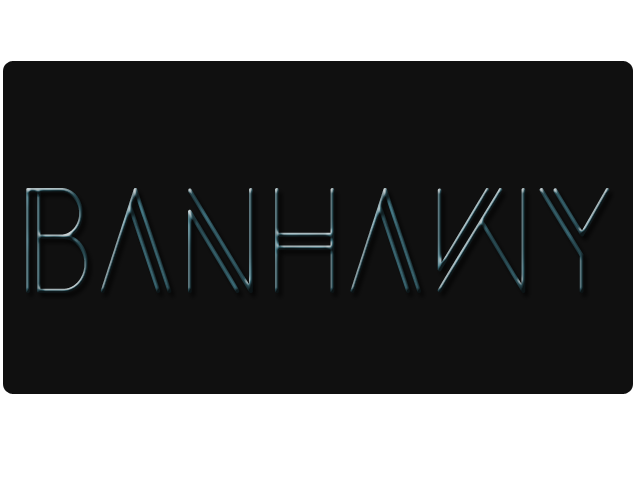
<style>
.page{position:relative;width:640px;height:480px;background:#101010}
.page>*{position:absolute;margin:0}
.t1{font:131px "Anders";scale:0.84 1}
</style>
<div class="page">
<p class="t1" style="left:26px;top:188px;width:584px;height:105px">banhawy</p>
</div>
